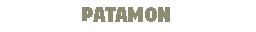
<style>
.page{position:relative;width:256px;height:32px;background:#ffffff}
.page>*{position:absolute;margin:0}
.t1{font:24px "Digitalt";color:#8c8c73}
</style>
<div class="page">
<p class="t1" style="left:82px;top:7px;width:88px;height:15px">Patamon</p>
</div>
